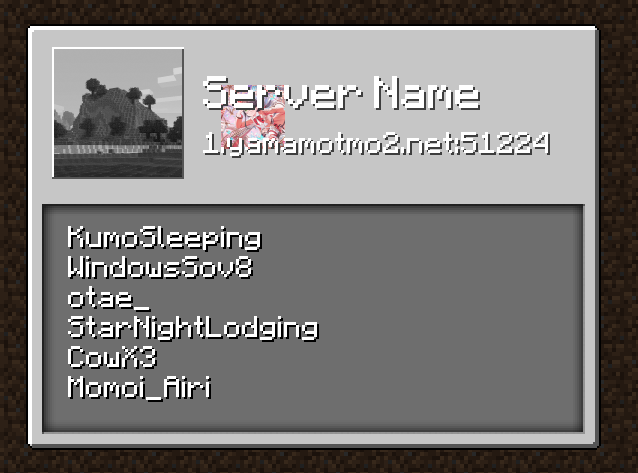
<style>
.page{position:relative;width:638px;height:473px;background:#6e6e6e}
.page>*{position:absolute;margin:0}
.t1{font:36px "MinecraftAE-Pixel";color:#ffffff}
.t2{font:24px "MinecraftAE-Pixel";color:#ffffff}
.t3{font:24px "MinecraftAE-Pixel";color:#3e3e3e}
</style>
<div class="page">
<p class="t1" style="left:203px;top:76px;width:275px;height:32px">Server Name</p>
<p class="t2" style="left:203px;top:132px;width:345px;height:24px">1.yamamotmo2.net:51224</p>
<p class="t3" style="left:205px;top:134px;width:345px;height:24px">1.yamamotmo2.net:51224</p>
<p class="t2" style="left:68px;top:226px;width:192px;height:24px">KumoSleeping</p>
<p class="t2" style="left:68px;top:256px;width:183px;height:21px">WindowsSov8</p>
<p class="t2" style="left:68px;top:286px;width:81px;height:24px">otae_</p>
<p class="t2" style="left:68px;top:316px;width:249px;height:24px">StarNightLodging</p>
<p class="t2" style="left:68px;top:346px;width:87px;height:21px">CowX3</p>
<p class="t2" style="left:68px;top:376px;width:141px;height:24px">Momoi_Airi</p>
</div>
